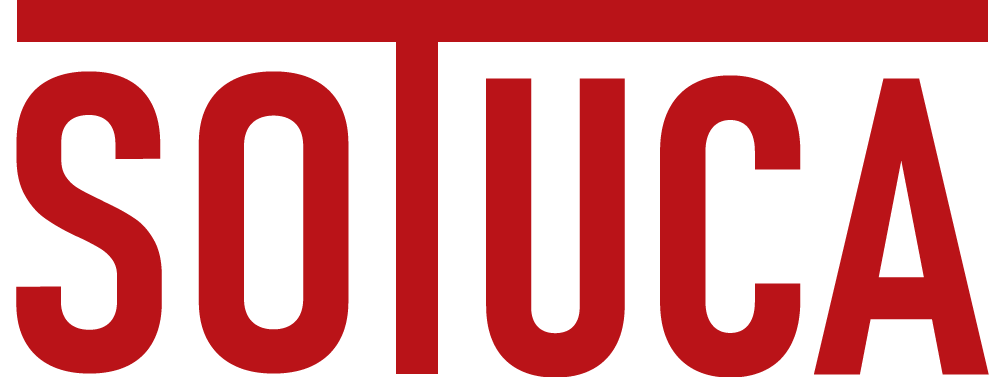
<style>
.page{position:relative;width:993px;height:377px;background:#ffffff}
.page>*{position:absolute;margin:0}
.t1{font:416.7px "Bahnschrift-SemiBoldCondensed";color:#ba1318}
</style>
<div class="page">
<p class="t1" style="left:16px;top:71px;width:333px;height:303px">SO</p>
<p class="t1" style="left:486px;top:75px;width:503px;height:303px">UCA</p>
</div>
